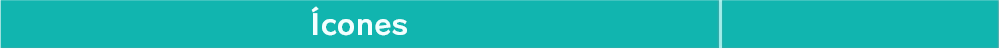
<style>
.page{position:relative;width:1000px;height:50px;background:#11b5af}
.page>*{position:absolute;margin:0}
.t1{font:28px "RodinPro-B";letter-spacing:0.016em;color:#f2ffff}
</style>
<div class="page">
<p class="t1" style="left:311px;top:6px;width:96px;height:30px">Ícones</p>
</div>
